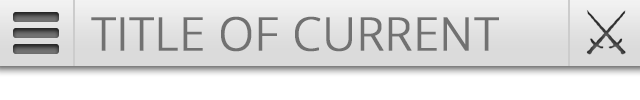
<style>
.page{position:relative;width:640px;height:100px;background:#ffffff}
.page>*{position:absolute;margin:0}
.t1{font:45.8px "OpenSans-Light";color:#717171;font-weight:bold}
</style>
<div class="page">
<p class="t1" style="left:91px;top:16px;width:408px;height:36px">TITLE OF CURRENT</p>
</div>
